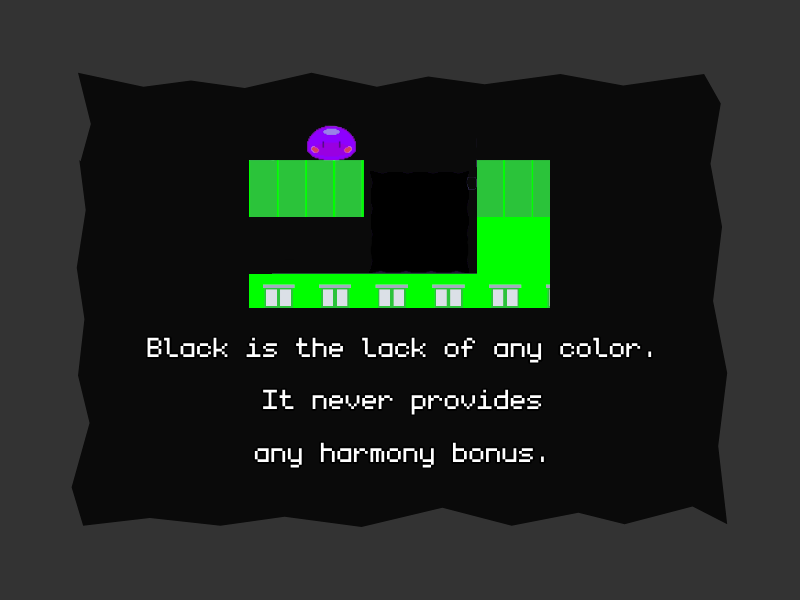
<style>
.page{position:relative;width:800px;height:600px;background:#0a0a0a}
.page>*{position:absolute;margin:0}
.t1{font:44px "monogram";color:#ffffff}
</style>
<div class="page">
<p class="t1" style="left:147px;top:337px;width:505px;height:131px;text-align:center">Black is the lack of any color.<br>It never provides<br>any harmony bonus.</p>
</div>
